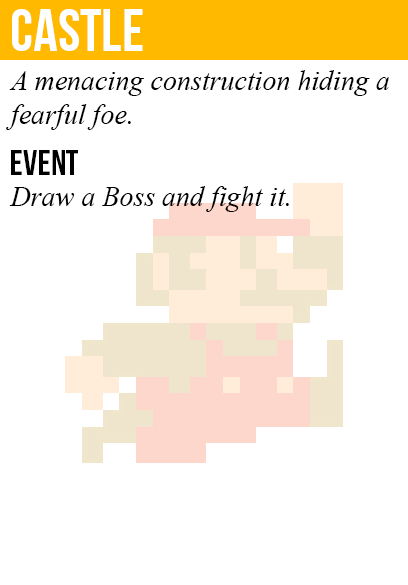
<style>
.page{position:relative;width:408px;height:585px;background:#ffffff}
.page>*{position:absolute;margin:0}
.t1{font:60px "BebasNeue";color:#ffffff}
.t2{font:28px "TimesNewRomanPS-ItalicMT";color:#000000}
.t3{font:36px "BebasNeue";color:#000000}
</style>
<div class="page">
<p class="t1" style="left:12px;top:9px;width:131px;height:42px">castle</p>
<p class="t2" style="left:6px;top:70px;width:383px;height:60px">A menacing construction hiding a<br>fearful foe.</p>
<p class="t3" style="left:11px;top:150px;width:67px;height:25px">event</p>
<p class="t2" style="left:9px;top:186px;width:280px;height:26px">Draw a Boss and fight it.</p>
</div>
